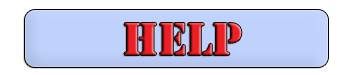
<style>
.page{position:relative;width:350px;height:75px;background:#ffffff}
.page>*{position:absolute;margin:0}
.t1{font:48px "Stencil"}
</style>
<div class="page">
<p class="t1" style="left:124px;top:23px;width:118px;height:32px">HELP</p>
</div>
